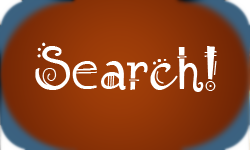
<style>
.page{position:relative;width:250px;height:150px}
.page>*{position:absolute;margin:0}
.t1{font:60px "Amadeus-Regular";color:#ffffff}
</style>
<div class="page">
<p class="t1" style="left:35px;top:42px;width:182px;height:50px">Search!</p>
</div>
